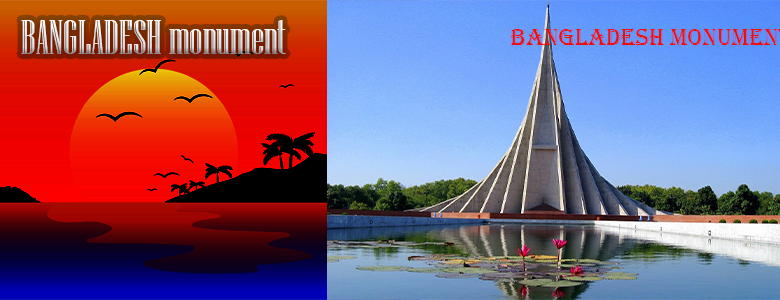
<style>
.page{position:relative;width:780px;height:300px}
.page>*{position:absolute;margin:0}
.t1{font:48px "NiagaraEngraved-Reg"}
</style>
<div class="page">
<p class="t1" style="left:21px;top:20px;width:265px;height:34px">BANGLADESH monument</p>
</div>
